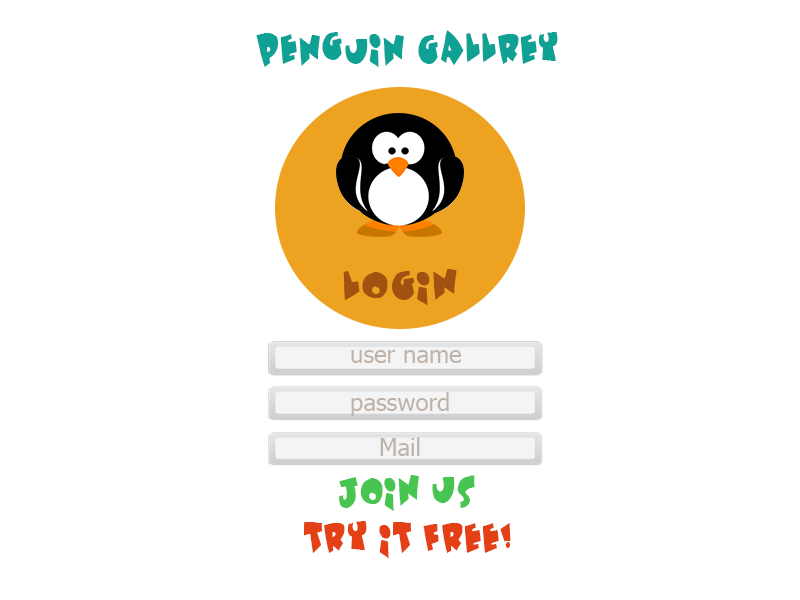
<style>
.page{position:relative;width:800px;height:600px;background:#ffffff}
.page>*{position:absolute;margin:0}
.t1{font:36px "Underattack";color:#10a195}
.t2{font:36.4px "Underattack";color:#a15110;scale:1.14 1}
.t3{font:24px "Tahoma";color:#beb3aa}
.t4{font:24.1px "Tahoma";color:#beb3aa}
.t5{font:36px "Underattack";color:#47c550}
.t6{font:36px "Underattack";color:#e34115}
</style>
<div class="page">
<p class="t1" style="left:256px;top:30px;width:302px;height:37px">penguin Gallrey</p>
<p class="t2" style="left:343px;top:269px;width:114px;height:36px">LOGIN</p>
<p class="t3" style="left:351px;top:350px;width:110px;height:13px">user name</p>
<p class="t4" style="left:351px;top:392px;width:98px;height:24px">password</p>
<p class="t4" style="left:380px;top:437px;width:40px;height:19px">Mail</p>
<p class="t5" style="left:339px;top:475px;width:136px;height:36px">JOIN US</p>
<p class="t6" style="left:304px;top:521px;width:207px;height:37px">Try IT free!</p>
</div>
